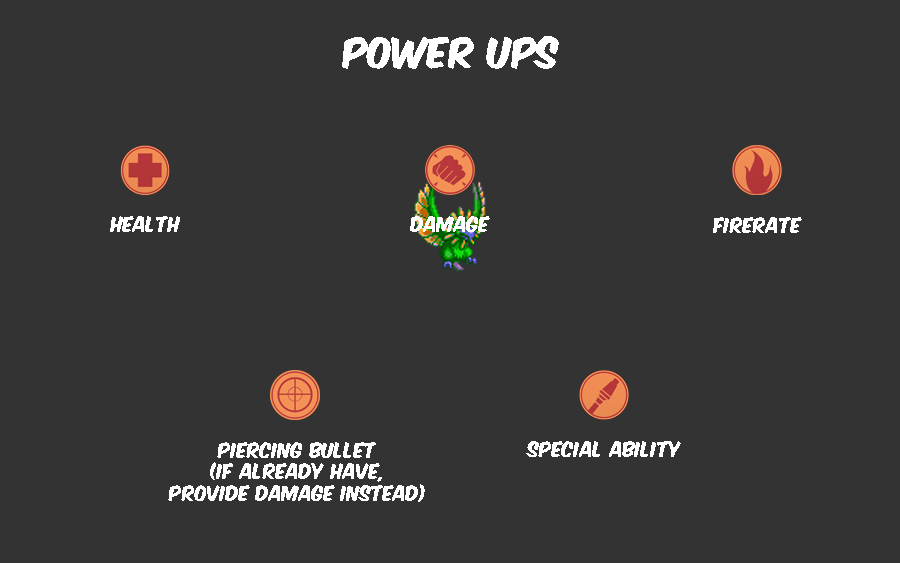
<style>
.page{position:relative;width:900px;height:563px;background:#333333}
.page>*{position:absolute;margin:0}
.t1{font:36px "KomikaAxis";color:#ffffff}
.t2{font:18px "KomikaAxis";color:#ffffff}
</style>
<div class="page">
<p class="t1" style="left:342px;top:36px;width:217px;height:33px">power ups</p>
<p class="t2" style="left:110px;top:216px;width:70px;height:16px">health</p>
<p class="t2" style="left:410px;top:216px;width:80px;height:16px">damage</p>
<p class="t2" style="left:713px;top:217px;width:89px;height:16px">firerate</p>
<p class="t2" style="left:168px;top:442px;width:257px;height:60px;text-align:center">piercing bullet<br>(if already have,<br>provide damage instead)</p>
<p class="t2" style="left:526px;top:441px;width:155px;height:16px">special ability</p>
</div>
